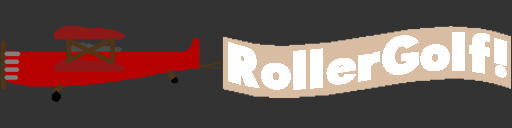
<style>
.page{position:relative;width:512px;height:128px;background:#333333}
.page>*{position:absolute;margin:0}
.t1{font:52.4px "SansSerifExbFLF";color:#ffffff}
</style>
<div class="page">
<p class="t1" style="left:228px;top:32px;width:279px;height:58px">RollerGolf!</p>
</div>
